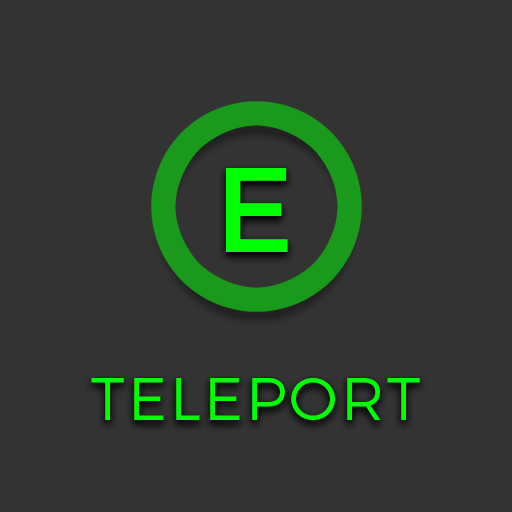
<style>
.page{position:relative;width:512px;height:512px;background:#333333}
.page>*{position:absolute;margin:0}
.t1{font:120px "Montserrat-Regular";color:#00ff00}
.t2{font:60px "Montserrat-Light";letter-spacing:0.05em;color:#00ff00}
</style>
<div class="page">
<p class="t1" style="left:226px;top:168px;width:62px;height:84px">E</p>
<p class="t2" style="left:91px;top:378px;width:329px;height:42px">TELEPORT</p>
</div>
